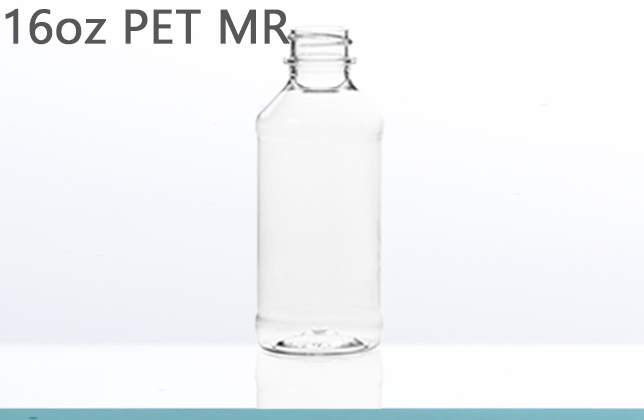
<style>
.page{position:relative;width:644px;height:420px}
.page>*{position:absolute;margin:0}
.t1{font:48px "Gadugi";color:#575757;font-weight:bold}
</style>
<div class="page">
<p class="t1" style="left:5px;top:8px;width:285px;height:37px">16oz PET MR</p>
</div>
